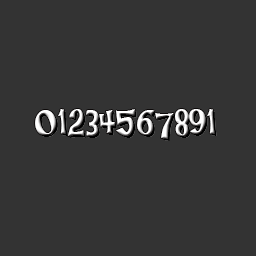
<style>
.page{position:relative;width:256px;height:256px;background:#333333}
.page>*{position:absolute;margin:0}
.t1{font:33px "ARCHRISTY";color:#ffffff}
</style>
<div class="page">
<p class="t1" style="left:35px;top:109px;width:180px;height:30px">01234567891</p>
</div>
